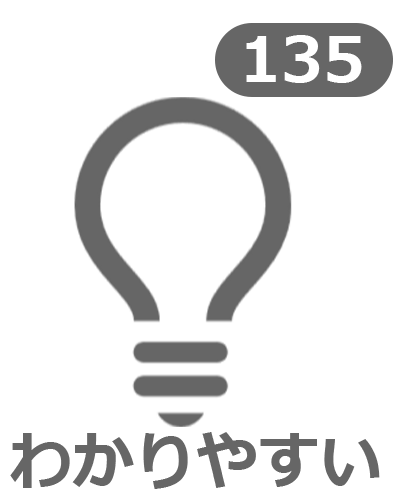
<style>
.page{position:relative;width:402px;height:500px;background:#ffffff}
.page>*{position:absolute;margin:0}
.t1{font:62.1px "Meiryo-Bold";color:#ffffff}
.t2{font:62.1px "Meiryo-Bold";color:#666666}
</style>
<div class="page">
<p class="t1" style="left:246px;top:35px;width:116px;height:48px">135</p>
<p class="t2" style="left:10px;top:432px;width:370px;height:57px">わかりやすい</p>
</div>
